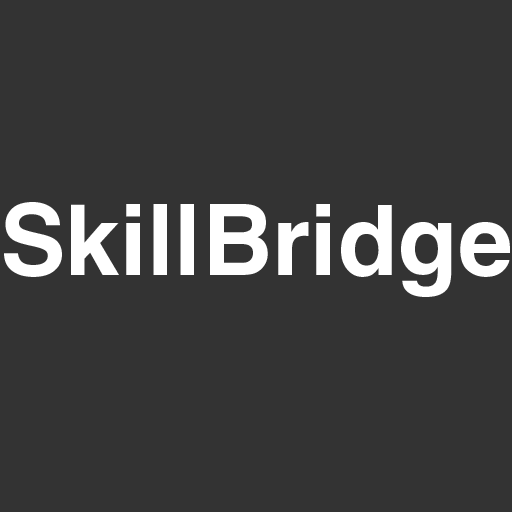
<style>
.page{position:relative;width:512px;height:512px;background:#333333}
.page>*{position:absolute;margin:0}
.t1{font:98px "Helvetica-Bold";color:#ffffff}
</style>
<div class="page">
<p class="t1" style="left:4px;top:202px;width:506px;height:95px">SkillBridge</p>
</div>
